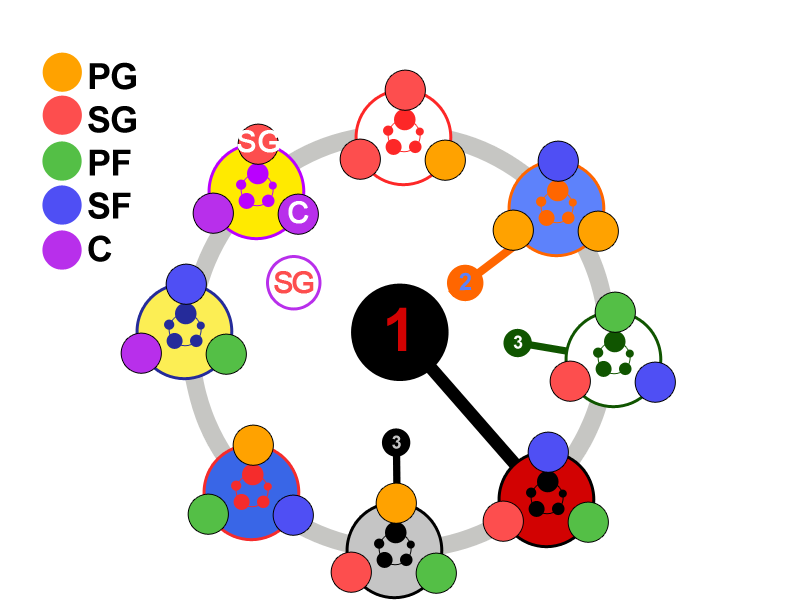
<style>
.page{position:relative;width:800px;height:600px;background:#ffffff}
.page>*{position:absolute;margin:0}
.t1{font:36px "Arial-BoldMT";letter-spacing:-0.02em;color:#000000}
.t2{font:30px "ArialMT";color:#ffffff;font-weight:bold}
.t3{font:30px "ArialMT";letter-spacing:-0.1em;color:#fd4e4e;font-weight:bold}
.t4{font:24px "Arial-BoldMT";letter-spacing:-0.02em;color:#5d82fb}
.t5{font:60px "Arial-BoldMT";letter-spacing:-0.02em;color:#d20202}
.t6{font:18px "Arial-BoldMT";letter-spacing:-0.02em;color:#ffffff}
.t7{font:18px "Arial-BoldMT";letter-spacing:-0.02em;color:#c5c5c5}
</style>
<div class="page">
<p class="t1" style="left:88px;top:62px;width:48px;height:200px">PG<br>SG<br>PF<br>SF<br>C</p>
<p class="t2" style="left:237px;top:130px;width:43px;height:23px">SG</p>
<p class="t2" style="left:288px;top:201px;width:21px;height:23px">C</p>
<p class="t3" style="left:274px;top:271px;width:40px;height:23px">SG</p>
<p class="t4" style="left:459px;top:272px;width:13px;height:19px;rotate:-1deg">2</p>
<p class="t5" style="left:387px;top:307px;width:20px;height:44px">1</p>
<p class="t6" style="left:513px;top:335px;width:10px;height:14px">3</p>
<p class="t7" style="left:392px;top:435px;width:9px;height:14px">3</p>
</div>
